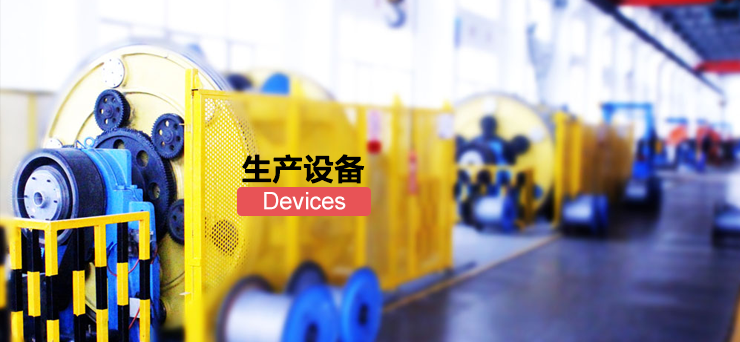
<style>
.page{position:relative;width:740px;height:342px}
.page>*{position:absolute;margin:0}
.t1{font:30px "FZLTZHK--GBK1-0";color:#000000;font-weight:bold}
.t2{font:24px "ArialMT";color:#ffffff}
</style>
<div class="page">
<p class="t1" style="left:242px;top:154px;width:123px;height:30px">生产设备</p>
<p class="t2" style="left:264px;top:192px;width:82px;height:18px">Devices</p>
</div>
